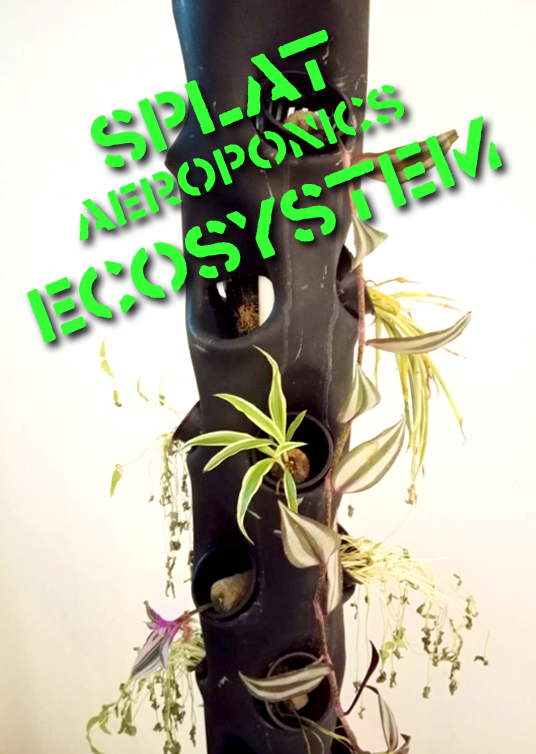
<style>
.page{position:relative;width:536px;height:754px}
.page>*{position:absolute;margin:0}
.t1{font:45.8px "Crass";letter-spacing:0.025em;color:#35ff35}
.t2{font:68.7px "Crass";letter-spacing:0.025em;color:#35ff35}
</style>
<div class="page">
<p class="t1" style="left:27px;top:29px;width:475px;height:314px;text-align:center;rotate:-21deg"><span class="t2">SpLAT<br></span>aeroponics<br><span class="t2">ECOSYSTEM</span></p>
</div>
